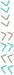
<style>
.page{position:relative;width:14px;height:75px;background:#ffffff}
.page>*{position:absolute;margin:0}
.t1{font:16px "ThrowMyHandsUpintheAir";color:#62c5c2;text-transform:uppercase}
.t2{font:16px "ThrowMyHandsUpintheAir";color:#a5a697;text-transform:uppercase}
</style>
<div class="page">
<p class="t1" style="left:0px;top:0px;width:10px;height:13px;rotate:90deg">&gt;&gt;</p>
<p class="t2" style="left:0px;top:14px;width:10px;height:13px;rotate:90deg">&gt;&gt;</p>
<p class="t2" style="left:0px;top:31px;width:14px;height:10px">&gt;&gt;</p>
<p class="t2" style="left:0px;top:54px;width:14px;height:9px;rotate:-180deg">&gt;&gt;</p>
<p class="t1" style="left:0px;top:42px;width:14px;height:10px">&gt;&gt;</p>
<p class="t1" style="left:0px;top:65px;width:14px;height:9px;rotate:-180deg">&gt;&gt;</p>
</div>
